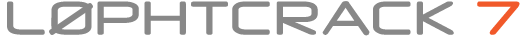
<style>
.page{position:relative;width:524px;height:36px;background:#ffffff}
.page>*{position:absolute;margin:0}
.t1{font:55.4px "Neuropol";letter-spacing:0.05em;color:#888888}
.t2{font:55.4px "Neuropol";letter-spacing:0.05em;color:#f1592a}
</style>
<div class="page">
<p class="t1" style="left:7px;top:1px;width:513px;height:35px">L0PHTCRACK <span class="t2">7</span></p>
</div>
